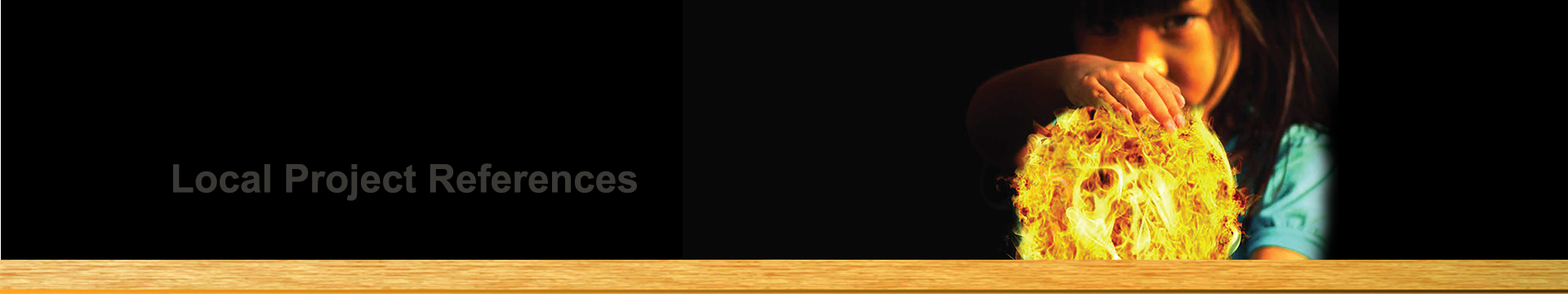
<style>
.page{position:relative;width:1568px;height:294px;background:#000000}
.page>*{position:absolute;margin:0}
.t1{font:39.2px "Arial-BoldMT";color:#3a3935}
</style>
<div class="page">
<p class="t1" style="left:173px;top:163px;width:464px;height:38px">Local Project References</p>
</div>
